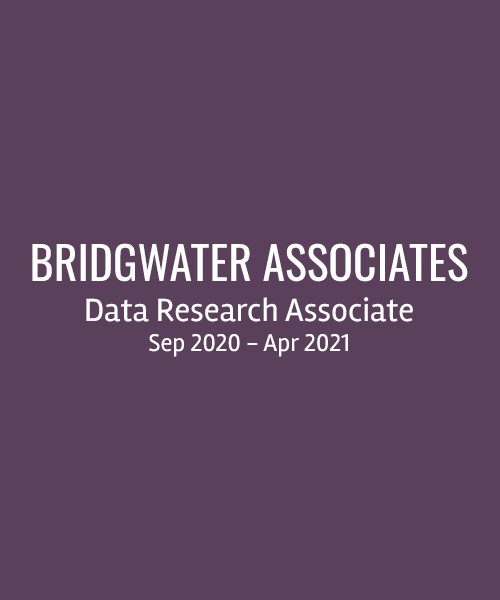
<style>
.page{position:relative;width:500px;height:600px;background:#5a405b}
.page>*{position:absolute;margin:0}
.t1{font:33.3px "Rambla-Regular";color:#ffffff}
.t2{font:45.8px "Oswald-Regular";color:#ffffff}
.t3{font:25px "Rambla-Regular";color:#ffffff}
</style>
<div class="page">
<p class="t1" style="left:32px;top:243px;width:436px;height:114px;text-align:center"><span class="t2">BRIDGWATER ASSOCIATES<br></span>Data Research Associate<br><span class="t3">Sep 2020 - Apr 2021</span></p>
</div>
